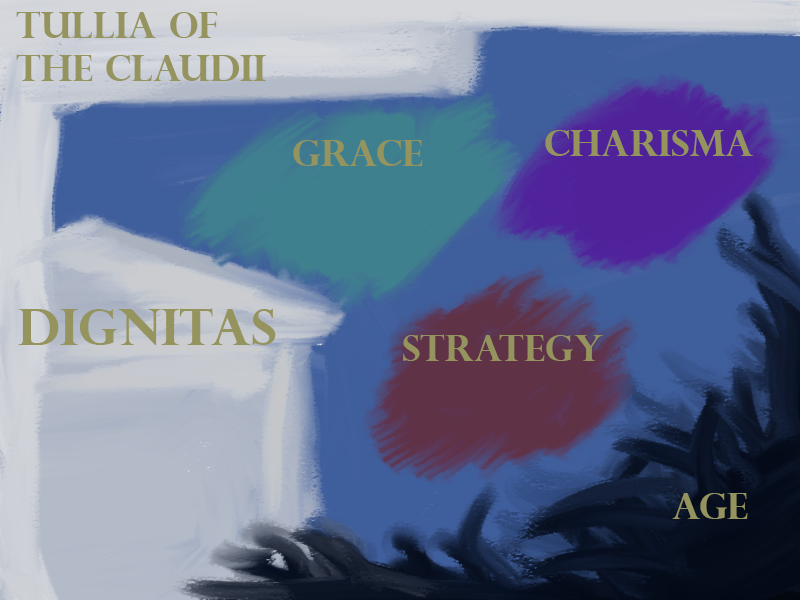
<style>
.page{position:relative;width:800px;height:600px}
.page>*{position:absolute;margin:0}
.t1{font:36px "PerpetuaTitlingMT-Bold";color:#96945e}
.t2{font:50px "PerpetuaTitlingMT-Bold";color:#96945e}
</style>
<div class="page">
<p class="t1" style="left:16px;top:11px;width:250px;height:70px">tullia of <br>the claudii</p>
<p class="t1" style="left:545px;top:130px;width:209px;height:26px">charisma</p>
<p class="t1" style="left:293px;top:140px;width:130px;height:26px">grace</p>
<p class="t2" style="left:18px;top:308px;width:258px;height:37px">dignitas</p>
<p class="t1" style="left:403px;top:334px;width:201px;height:27px">strategy</p>
<p class="t1" style="left:672px;top:493px;width:76px;height:26px">age</p>
</div>
